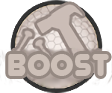
<style>
.page{position:relative;width:112px;height:93px;background:#ffffff}
.page>*{position:absolute;margin:0}
.t1{font:36px "Junegull";color:#cdc0b8}
</style>
<div class="page">
<p class="t1" style="left:8px;top:54px;width:101px;height:22px">BOOST</p>
</div>
